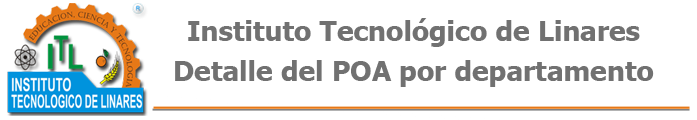
<style>
.page{position:relative;width:697px;height:120px;background:#ffffff}
.page>*{position:absolute;margin:0}
.t1{font:28px "Tahoma-Bold";color:#717171}
</style>
<div class="page">
<p class="t1" style="left:188px;top:18px;width:452px;height:29px">Instituto Tecnológico de Linares</p>
<p class="t1" style="left:175px;top:60px;width:479px;height:27px">Detalle del POA por departamento</p>
</div>
